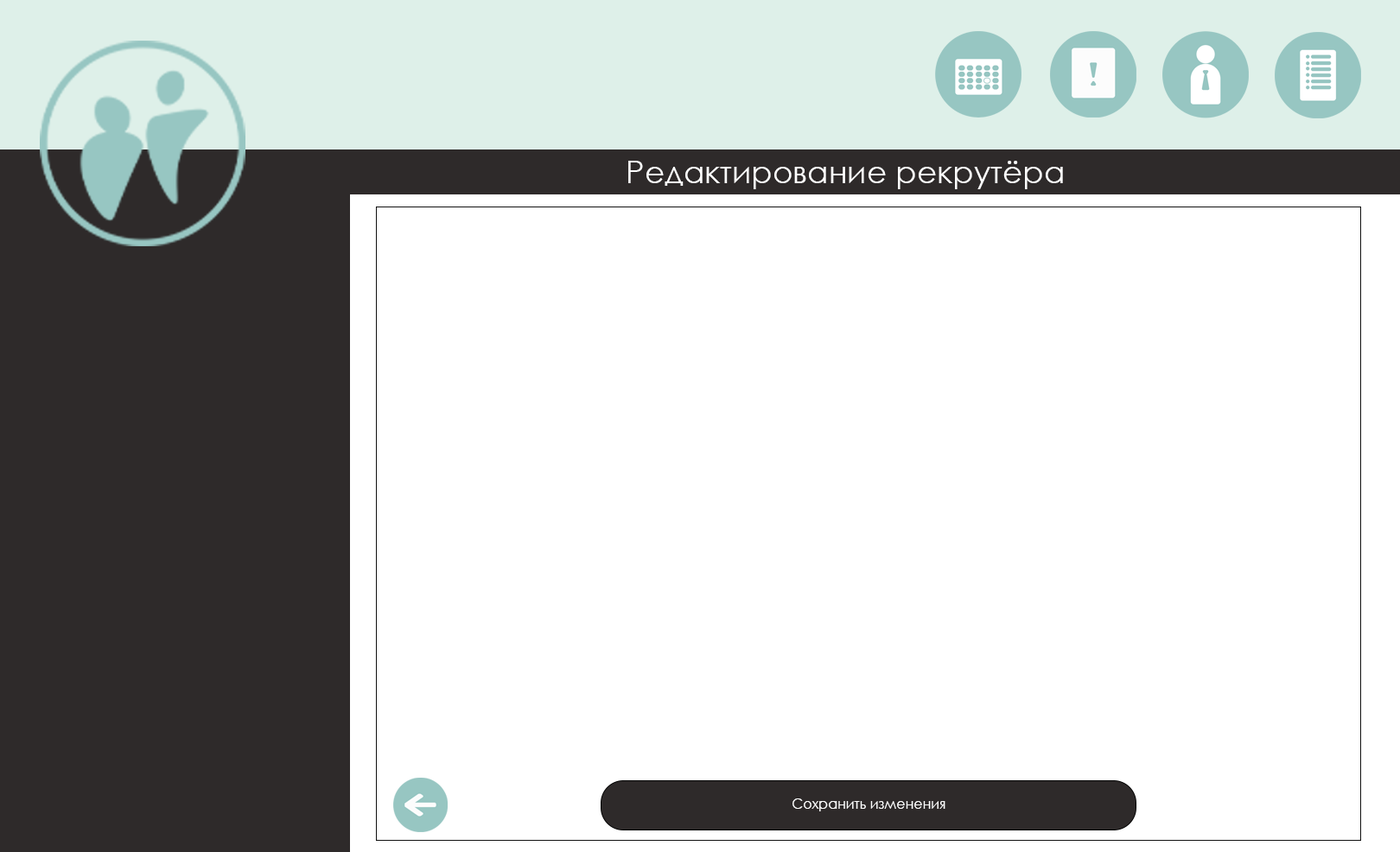
<style>
.page{position:relative;width:1400px;height:852px;background:#ffffff}
.page>*{position:absolute;margin:0}
.t1{font:31.1px "CenturyGothic";color:#ffffff}
.t2{font:13.8px "CenturyGothic";color:#ffffff}
</style>
<div class="page">
<p class="t1" style="left:628px;top:161px;width:435px;height:28px">Редактирование рекрутёра</p>
<p class="t2" style="left:792px;top:798px;width:153px;height:13px">Сохранить изменения</p>
</div>
